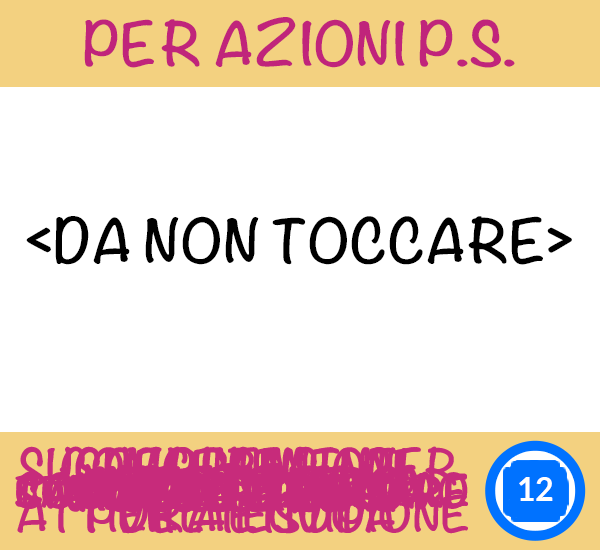
<style>
.page{position:relative;width:600px;height:550px;background:#ffffff}
.page>*{position:absolute;margin:0}
.t1{font:54px "Noteworthy-Bold";color:#c0247b;text-transform:uppercase}
.t2{font:54px "Noteworthy-Bold";color:#000000;text-transform:uppercase}
</style>
<div class="page">
<p class="t1" style="left:84px;top:17px;width:431px;height:51px">per azioni p.s.</p>
<p class="t2" style="left:26px;top:216px;width:546px;height:49px">&lt;da non toccare&gt;</p>
</div>
